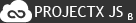
<style>
.page{position:relative;width:136px;height:23px;background:#333333}
.page>*{position:absolute;margin:0}
.t1{font:15.3px "TrebuchetMS";color:#ffffff}
.t2{font:9.6px "TrebuchetMS";color:#ffffff}
</style>
<div class="page">
<p class="t1" style="left:35px;top:6px;width:88px;height:11px">PROJECTX JS</p>
<p class="t2" style="left:128px;top:13px;width:5px;height:7px">β</p>
</div>
